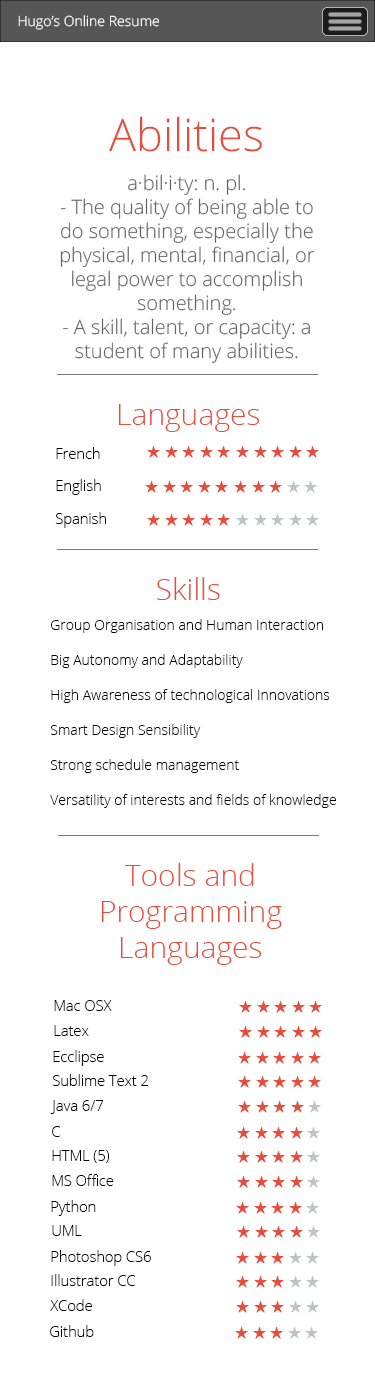
<style>
.page{position:relative;width:375px;height:1375px;background:#ffffff}
.page>*{position:absolute;margin:0}
.t1{font:14.1px "OpenSans-Light";color:#ffffff}
.t2{font:45px "OpenSans-Light";color:#e74c3c}
.t3{font:20px "OpenSans-Light";color:#636363}
.t4{font:30px "OpenSans-Light";color:#e74c3c}
.t5{font:14.6px "OpenSans-Light";color:#000000}
.t6{font:14px/35px "OpenSans-Light";color:#000000}
</style>
<div class="page">
<p class="t1" style="left:18px;top:15px;width:142px;height:15px">Hugo’s Online Resume</p>
<p class="t2" style="left:109px;top:116px;width:153px;height:36px">Abilities</p>
<p class="t3" style="left:60px;top:174px;width:255px;height:189px;text-align:center">a·bil·i·ty: n. pl.<br>- The quality of being able to do something, especially the physical, mental, financial, or legal power to accomplish something.<br>- A skill, talent, or capacity: a student of many abilities.</p>
<p class="t4" style="left:118px;top:404px;width:142px;height:28px">Languages</p>
<p class="t5" style="left:56px;top:447px;width:44px;height:12px">French</p>
<p class="t5" style="left:56px;top:479px;width:45px;height:16px">English</p>
<p class="t5" style="left:55px;top:512px;width:51px;height:16px">Spanish</p>
<p class="t4" style="left:157px;top:577px;width:63px;height:23px">Skills</p>
<p class="t6" style="left:50px;top:619px;width:286px;height:189px">Group Organisation and Human Interaction<br>Big Autonomy and Adaptability<br>High Awareness of technological Innovations<br>Smart Design Sensibility<br>Strong schedule management<br>Versatility of interests and fields of knowledge</p>
<p class="t4" style="left:101px;top:863px;width:181px;height:102px;text-align:center">Tools and Programming Languages Languages</p>
<p class="t5" style="left:54px;top:1000px;width:58px;height:11px">Mac OSX</p>
<p class="t5" style="left:54px;top:1025px;width:35px;height:11px">Latex</p>
<p class="t5" style="left:53px;top:1050px;width:51px;height:16px">Ecclipse</p>
<p class="t5" style="left:52px;top:1074px;width:97px;height:12px">Sublime Text 2</p>
<p class="t5" style="left:50px;top:1100px;width:54px;height:14px">Java 6/7</p>
<p class="t5" style="left:52px;top:1126px;width:9px;height:11px">C</p>
<p class="t5" style="left:52px;top:1150px;width:58px;height:13px">HTML (5)</p>
<p class="t5" style="left:52px;top:1174px;width:62px;height:12px">MS Office</p>
<p class="t5" style="left:51px;top:1200px;width:45px;height:16px">Python</p>
<p class="t5" style="left:52px;top:1225px;width:30px;height:11px">UML</p>
<p class="t5" style="left:51px;top:1250px;width:100px;height:16px">Photoshop CS6</p>
<p class="t5" style="left:51px;top:1274px;width:85px;height:12px">Illustrator CC</p>
<p class="t5" style="left:50px;top:1299px;width:42px;height:12px">XCode</p>
<p class="t5" style="left:50px;top:1325px;width:44px;height:12px">Github</p>
</div>
